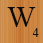
<style>
.page{position:relative;width:43px;height:43px}
.page>*{position:absolute;margin:0}
.t1{font:30px "TimesNewRomanPSMT";color:#0c0c0b}
.t2{font:12px "TimesNewRomanPSMT";color:#0c0c0b}
</style>
<div class="page">
<p class="t1" style="left:7px;top:7px;width:29px;height:20px">W</p>
<p class="t2" style="left:32px;top:28px;width:7px;height:9px">4</p>
</div>
